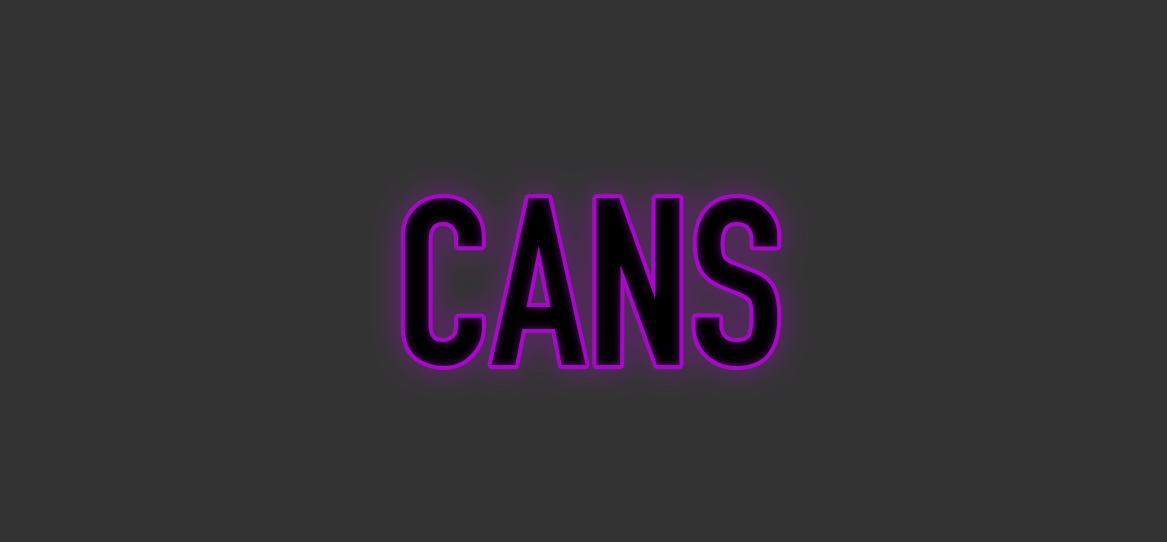
<style>
.page{position:relative;width:1167px;height:542px;background:#333333}
.page>*{position:absolute;margin:0}
.t1{font:233.7px "DINEngschrift";color:#070009}
</style>
<div class="page">
<p class="t1" style="left:404px;top:198px;width:374px;height:168px">CANS</p>
</div>
